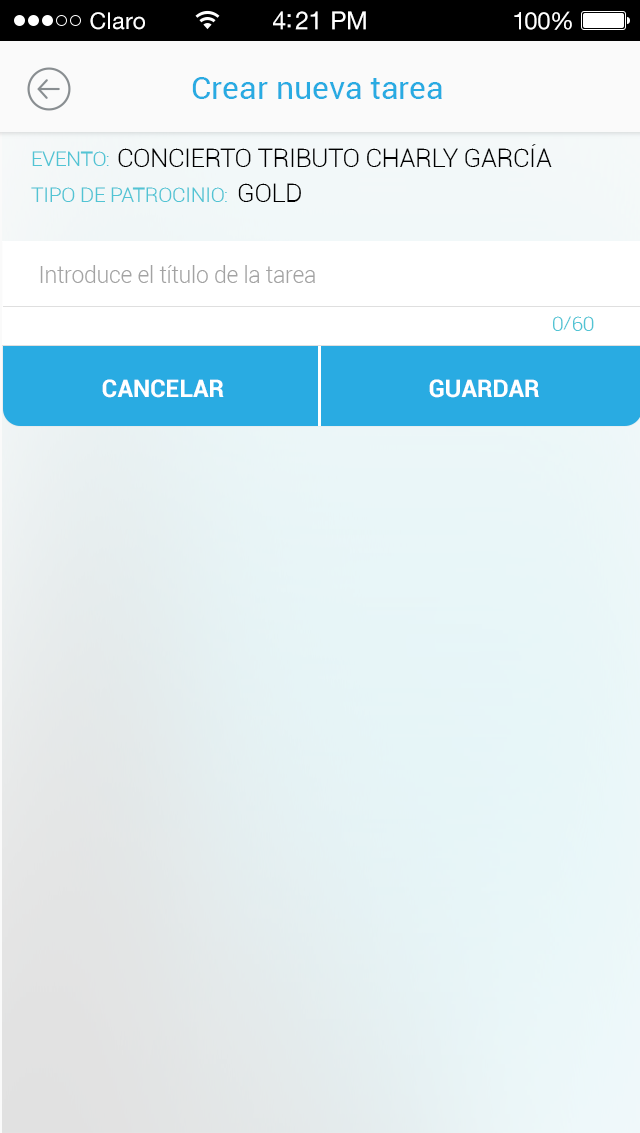
<style>
.page{position:relative;width:640px;height:1133px}
.page>*{position:absolute;margin:0}
.t1{font:23px "HelveticaNeueLTStd-Roman";letter-spacing:0.02em;color:#ffffff}
.t2{font:25px "HelveticaNeueLTStd-Roman";letter-spacing:-0.02em;color:#ffffff}
.t3{font:24px "HelveticaNeueLTStd-Roman";letter-spacing:-0.02em;color:#ffffff}
.t4{font:32px "Roboto-Regular";color:#29abe2}
.t5{font:25px "Roboto-Light";letter-spacing:-0.01em;color:#000000}
.t6{font:20.4px "Roboto-Light";letter-spacing:-0.01em;color:#51c4d4}
.t7{font:22.9px "Roboto-Light";letter-spacing:-0.01em;color:#a3a3a3}
.t8{font:24.1px "Roboto-Bold";color:#ffffff}
</style>
<div class="page">
<p class="t1" style="left:90px;top:12px;width:55px;height:18px">Claro</p>
<p class="t2" style="left:273px;top:11px;width:93px;height:19px">4:21 PM</p>
<p class="t3" style="left:514px;top:11px;width:58px;height:19px">100%</p>
<p class="t4" style="left:192px;top:77px;width:250px;height:22px">Crear nueva tarea</p>
<p class="t5" style="left:118px;top:144px;width:434px;height:23px">CONCIERTO TRIBUTO CHARLY GARCÍA</p>
<p class="t6" style="left:32px;top:151px;width:77px;height:15px">EVENTO:</p>
<p class="t5" style="left:238px;top:183px;width:63px;height:19px">GOLD</p>
<p class="t6" style="left:31px;top:187px;width:196px;height:15px">TIPO DE PATROCINIO:</p>
<p class="t7" style="left:40px;top:265px;width:275px;height:18px">Introduce el título de la tarea</p>
<p class="t6" style="left:553px;top:316px;width:41px;height:15px">0/60</p>
<p class="t8" style="left:102px;top:379px;width:122px;height:19px">CANCELAR</p>
<p class="t8" style="left:429px;top:379px;width:110px;height:19px">GUARDAR</p>
</div>
